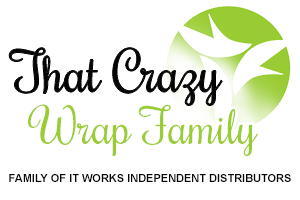
<style>
.page{position:relative;width:300px;height:200px;background:#ffffff}
.page>*{position:absolute;margin:0}
.t1{font:54px "Rochester";color:#060606}
.t2{font:48px "Rochester";color:#9acd35}
.t3{font:11px "Arial-BoldMT";color:#060606}
</style>
<div class="page">
<p class="t1" style="left:9px;top:47px;width:214px;height:59px">That Crazy</p>
<p class="t2" style="left:28px;top:104px;width:230px;height:52px">Wrap Family</p>
<p class="t3" style="left:9px;top:174px;width:282px;height:8px">FAMILY OF IT WORKS INDEPENDENT DISTRIBUTORS</p>
</div>
